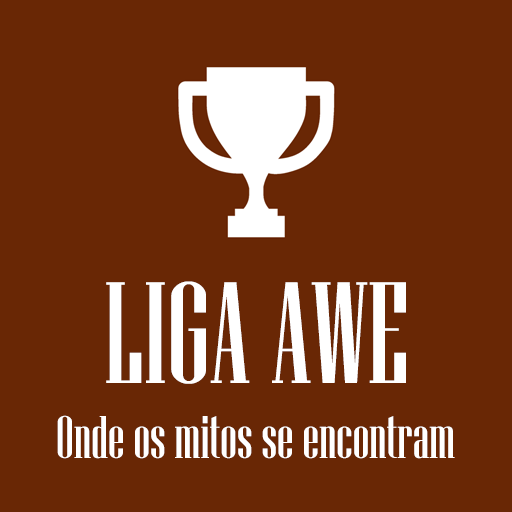
<style>
.page{position:relative;width:512px;height:512px;background:#692705}
.page>*{position:absolute;margin:0}
.t1{font:144px "NiagaraSolid-Reg";color:#ffffff}
.t2{font:60px "NiagaraSolid-Reg";color:#ffffff}
</style>
<div class="page">
<p class="t1" style="left:106px;top:281px;width:300px;height:103px">LIGA AWE</p>
<p class="t2" style="left:57px;top:415px;width:398px;height:44px">Onde os mitos se encontram</p>
</div>
